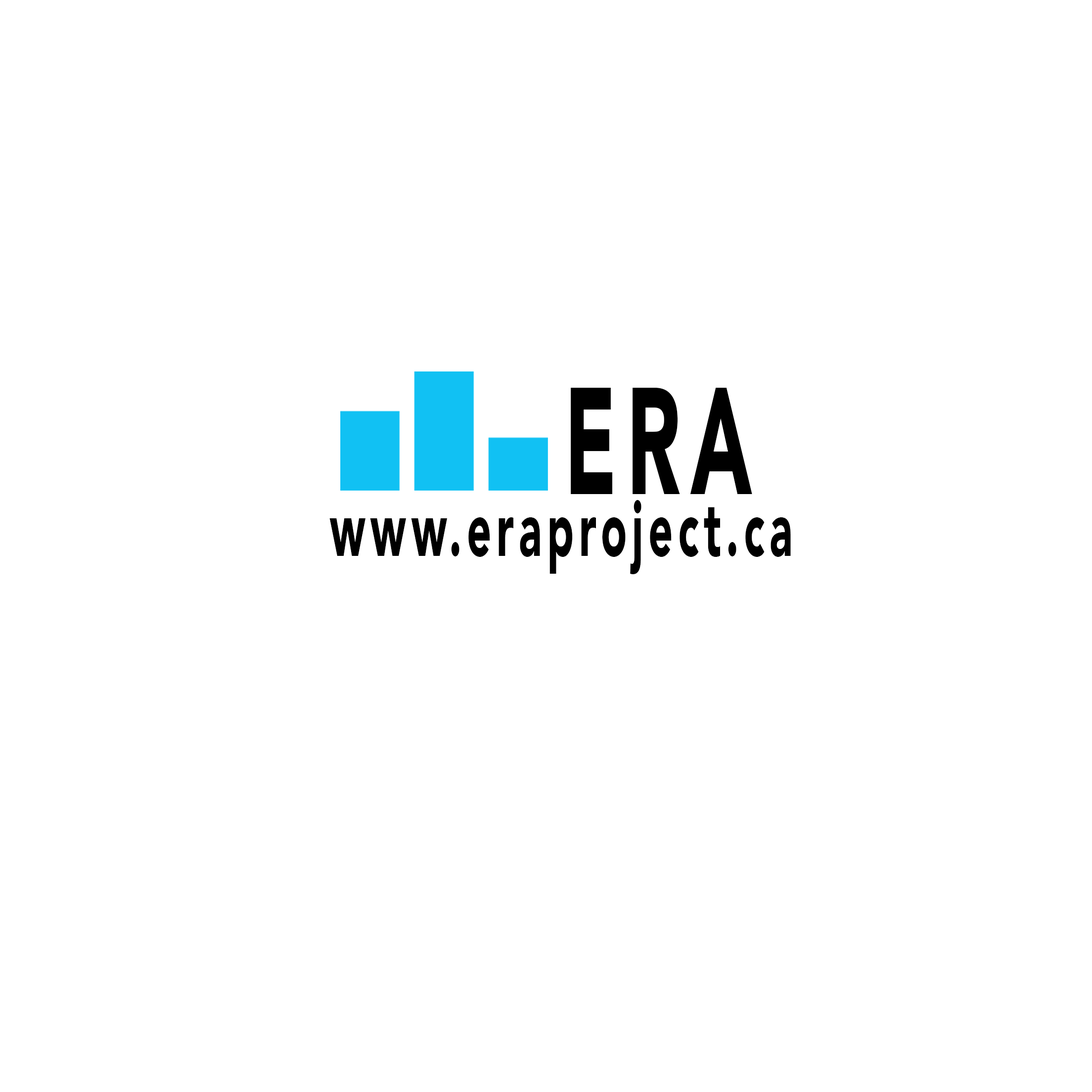
<style>
.page{position:relative;width:1092px;height:1092px;background:#ffffff}
.page>*{position:absolute;margin:0}
.t1{font:150.2px "Avenir-Black";letter-spacing:0.12em;color:#000000;scale:0.55 1}
.t2{font:77.3px "Avenir-Black";letter-spacing:0.12em;color:#000000;scale:0.55 1}
</style>
<div class="page">
<p class="t1" style="left:571px;top:388px;width:181px;height:106px">ERA</p>
<p class="t2" style="left:329px;top:500px;width:462px;height:74px">www.eraproject.ca</p>
</div>
